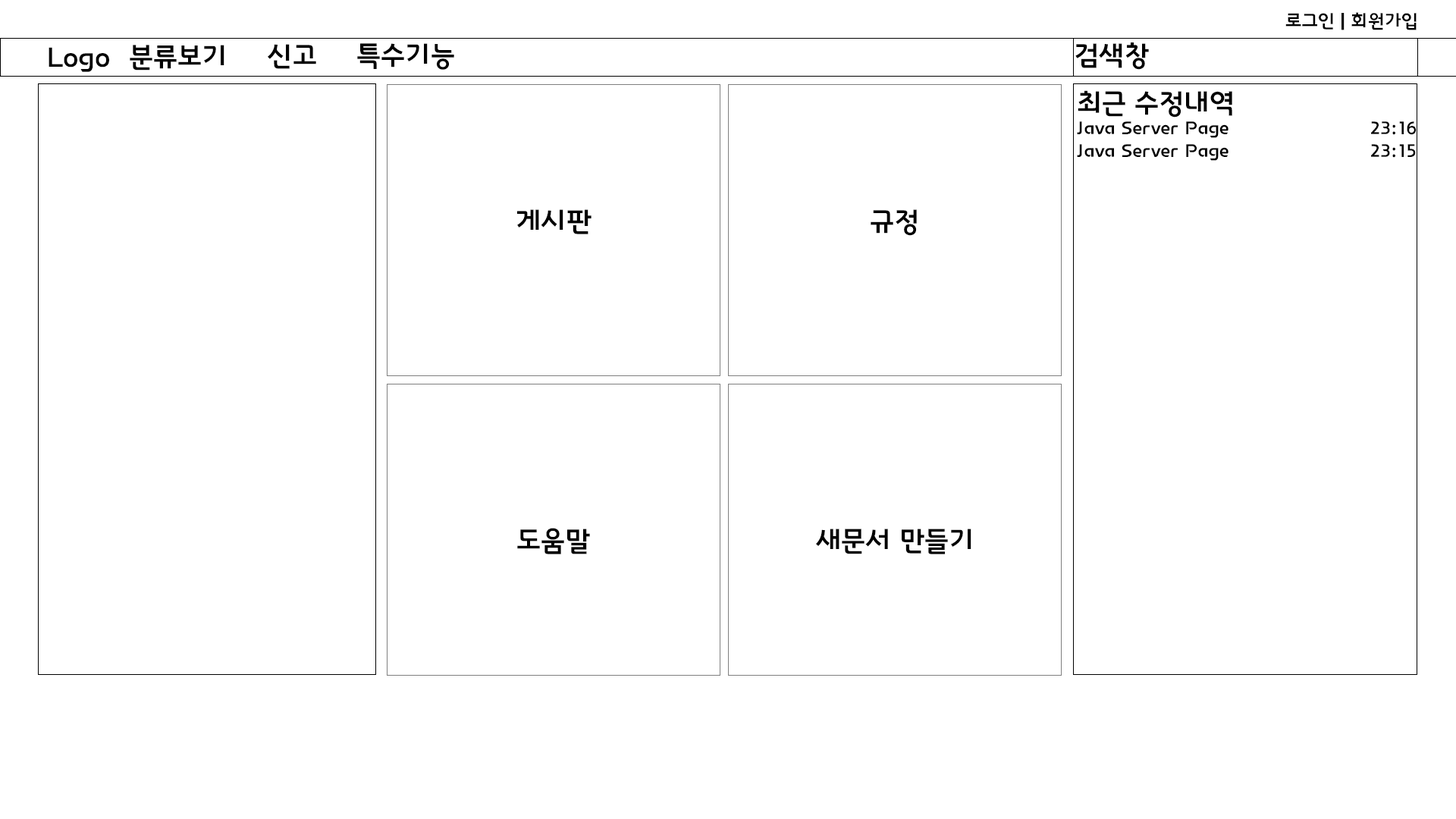
<style>
.page{position:relative;width:1456px;height:819px;background:#ffffff}
.page>*{position:absolute;margin:0}
.t1{font:18.2px "InterGTB";color:#000000}
.t2{font:27.3px "InterGTB";color:#000000}
</style>
<div class="page">
<p class="t1" style="left:1285px;top:12px;width:132px;height:18px">로그인 | 회원가입</p>
<p class="t2" style="left:49px;top:47px;width:60px;height:25px">Logo</p>
<p class="t2" style="left:130px;top:45px;width:94px;height:26px">분류보기</p>
<p class="t2" style="left:268px;top:44px;width:48px;height:25px">신고</p>
<p class="t2" style="left:357px;top:43px;width:97px;height:27px">특수기능</p>
<p class="t2" style="left:1075px;top:42px;width:74px;height:28px">검색창</p>
<p class="t2" style="left:1078px;top:90px;width:154px;height:28px">최근 수정내역</p>
<p class="t1" style="left:1077px;top:121px;width:340px;height:17px">Java Server Page                         23:16</p>
<p class="t1" style="left:1077px;top:144px;width:339px;height:17px">Java Server Page                         23:15</p>
<p class="t2" style="left:517px;top:209px;width:74px;height:25px">게시판</p>
<p class="t2" style="left:871px;top:209px;width:46px;height:27px">규정</p>
<p class="t2" style="left:517px;top:528px;width:73px;height:26px">도움말</p>
<p class="t2" style="left:816px;top:529px;width:155px;height:25px">새문서 만들기</p>
</div>
